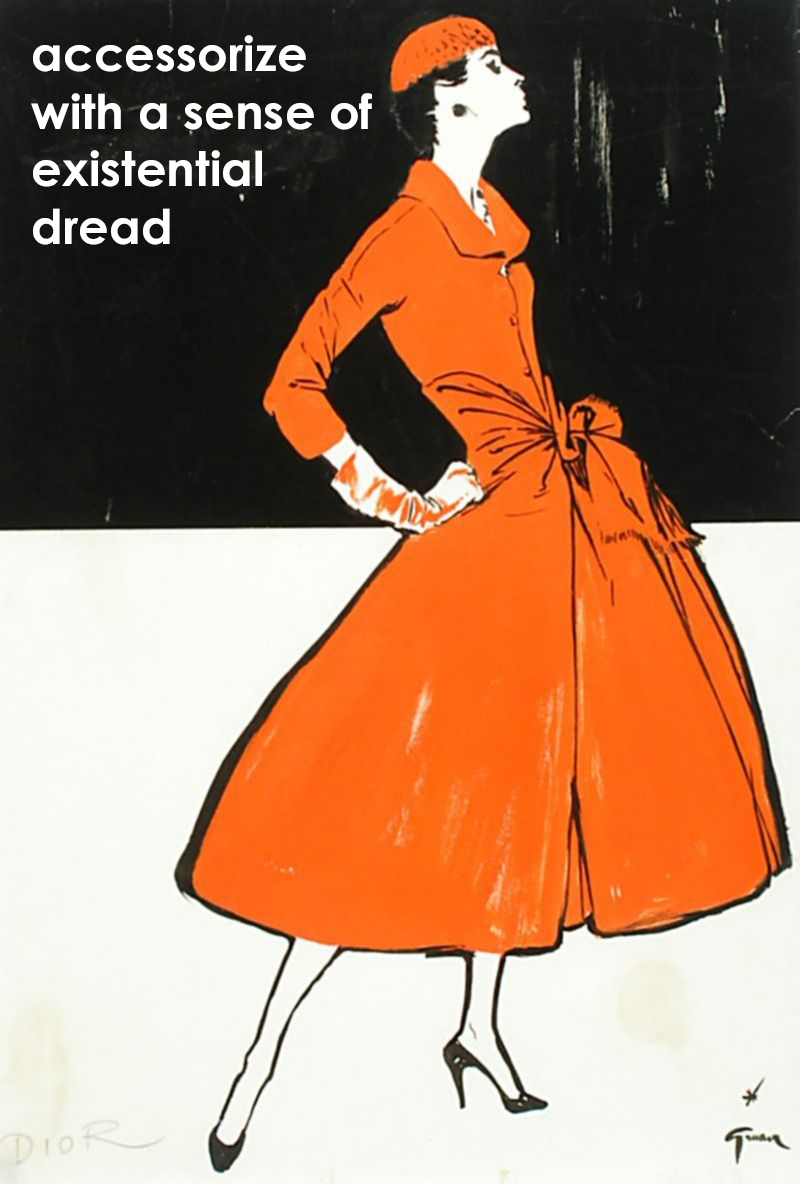
<style>
.page{position:relative;width:800px;height:1184px}
.page>*{position:absolute;margin:0}
.t1{font:48px "CenturyGothic-Bold";color:#ffffff}
</style>
<div class="page">
<p class="t1" style="left:31px;top:35px;width:341px;height:210px">accessorize<br>with a sense of<br>existential<br>dread</p>
</div>
